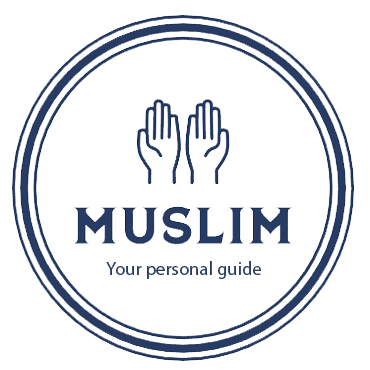
<style>
.page{position:relative;width:370px;height:370px;background:#ffffff}
.page>*{position:absolute;margin:0}
.t1{font:18.7px "MyriadPro-Regular";color:#283c63}
</style>
<div class="page">
<p class="t1" style="left:106px;top:261px;width:155px;height:18px">Your personal guide</p>
</div>
